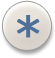
<style>
.page{position:relative;width:55px;height:58px;background:#ffffff}
.page>*{position:absolute;margin:0}
.t1{font:48px "BitstreamVeraSansMono-Roman";letter-spacing:0.06em;color:#4c7097;font-weight:bold}
</style>
<div class="page">
<p class="t1" style="left:17px;top:15px;width:23px;height:23px">*</p>
</div>
